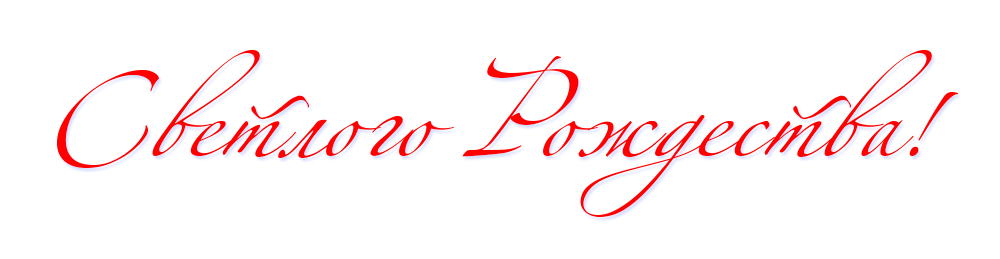
<style>
.page{position:relative;width:1000px;height:259px;background:#ffffff}
.page>*{position:absolute;margin:0}
.t1{font:155.4px "AlexandraZeferinoThree";color:#ff0000;font-style:italic}
</style>
<div class="page">
<p class="t1" style="left:56px;top:50px;width:903px;height:167px">Светлого Рождества!</p>
</div>
